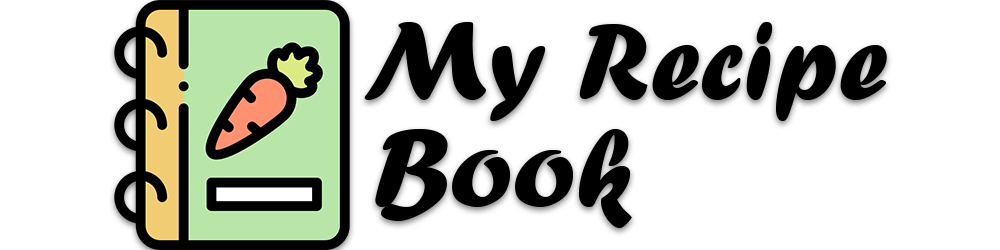
<style>
.page{position:relative;width:1000px;height:250px;background:#ffffff}
.page>*{position:absolute;margin:0}
.t1{font:116.4px "ForteMT";color:#000000}
</style>
<div class="page">
<p class="t1" style="left:364px;top:22px;width:523px;height:99px">My Recipe</p>
<p class="t1" style="left:375px;top:129px;width:257px;height:99px">Book</p>
</div>
